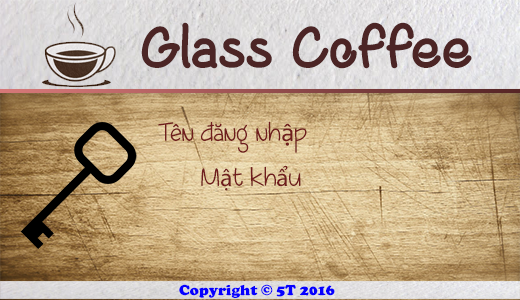
<style>
.page{position:relative;width:520px;height:300px}
.page>*{position:absolute;margin:0}
.t1{font:60px "CoffeewithSugar";color:#4c2525}
.t2{font:25px "CoffeeAtMidnightDemo";color:#701d1d}
.t3{font:25px "Consolas";color:#701d1d}
.t4{font:25px "MyriadPro-Regular";color:#701d1d}
.t5{font:15px "CooperBlack";color:#0600ff}
</style>
<div class="page">
<p class="t1" style="left:141px;top:22px;width:331px;height:47px">Glass Coffee</p>
<p class="t2" style="left:158px;top:121px;width:149px;height:32px">Tên đăng nh<span class="t3">ậ</span>p</p>
<p class="t2" style="left:201px;top:165px;width:100px;height:26px">M<span class="t4">ậ</span>t kh<span class="t4">ẩ</span>u</p>
<p class="t5" style="left:179px;top:284px;width:156px;height:14px">Copyright © 5T 2016</p>
</div>
